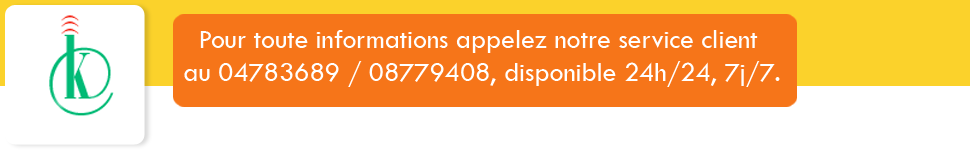
<style>
.page{position:relative;width:970px;height:150px;background:#ffffff}
.page>*{position:absolute;margin:0}
.t1{font:27.5px "TwCenMT-Regular";color:#ffffff}
</style>
<div class="page">
<p class="t1" style="left:184px;top:30px;width:596px;height:57px;text-align:center">Pour toute informations appelez notre service client <br>au 04783689 / 08779408, disponible 24h/24, 7j/7.</p>
</div>
